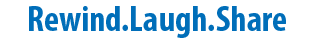
<style>
.page{position:relative;width:318px;height:41px;background:#ffffff}
.page>*{position:absolute;margin:0}
.t1{font:36px "MyriadPro-BoldCond";color:#006eb9}
</style>
<div class="page">
<p class="t1" style="left:29px;top:6px;width:257px;height:32px">Rewind.Laugh.Share</p>
</div>
